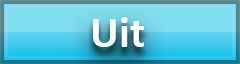
<style>
.page{position:relative;width:240px;height:64px;background:#7fdbef}
.page>*{position:absolute;margin:0}
.t1{font:44.4px "Calibri-Bold";color:#ffffff}
</style>
<div class="page">
<p class="t1" style="left:93px;top:17px;width:51px;height:30px">Uit</p>
</div>
